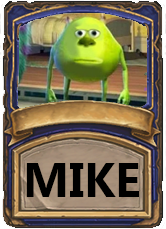
<style>
.page{position:relative;width:166px;height:229px}
.page>*{position:absolute;margin:0}
.t1{font:48px "MicrosoftTaiLe-Bold";color:#000000}
</style>
<div class="page">
<p class="t1" style="left:26px;top:163px;width:113px;height:34px">MIKE</p>
</div>
